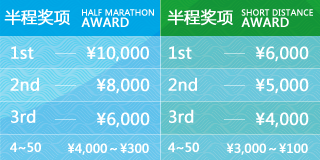
<style>
.page{position:relative;width:320px;height:160px}
.page>*{position:absolute;margin:0}
.t1{font:16px "MicrosoftYaHei";color:#ffffff;font-weight:bold}
.t2{font:8px/8px "MicrosoftYaHei";color:#ffffff;font-weight:bold}
.t3{font:12px/8px "MicrosoftYaHei";color:#ffffff;font-weight:bold}
.t4{font:16px/32px "MicrosoftYaHei";color:#ffffff;font-weight:bold}
.t5{font:16px/28px "MicrosoftYaHei";color:#ffffff;font-weight:bold}
.t6{font:12px "MicrosoftYaHei";color:#ffffff;font-weight:bold}
</style>
<div class="page">
<p class="t1" style="left:4px;top:9px;width:66px;height:17px">半程奖项</p>
<p class="t2" style="left:81px;top:9px;width:73px;height:18px">HALF MARATHON<br><span class="t3">AWARD</span></p>
<p class="t1" style="left:167px;top:9px;width:66px;height:17px">半程奖项</p>
<p class="t2" style="left:241px;top:9px;width:72px;height:18px">SHORT DISTANCE<br><span class="t3">AWARD</span></p>
<p class="t4" style="left:10px;top:46px;width:29px;height:77px">1st<br>2nd<br><span class="t5">3rd</span></p>
<p class="t1" style="left:86px;top:46px;width:63px;height:16px">¥10,000</p>
<p class="t4" style="left:168px;top:46px;width:29px;height:77px">1st<br>2nd<br><span class="t5">3rd</span></p>
<p class="t1" style="left:255px;top:46px;width:54px;height:16px">¥6,000</p>
<p class="t1" style="left:96px;top:78px;width:54px;height:16px">¥8,000</p>
<p class="t1" style="left:255px;top:78px;width:54px;height:16px">¥5,000</p>
<p class="t1" style="left:96px;top:112px;width:54px;height:16px">¥6,000</p>
<p class="t1" style="left:255px;top:112px;width:54px;height:16px">¥4,000</p>
<p class="t6" style="left:10px;top:142px;width:31px;height:10px">4~50</p>
<p class="t6" style="left:67px;top:143px;width:82px;height:12px">¥4,000～¥300</p>
<p class="t6" style="left:168px;top:142px;width:31px;height:10px">4~50</p>
<p class="t6" style="left:226px;top:143px;width:82px;height:12px">¥3,000～¥100</p>
</div>
